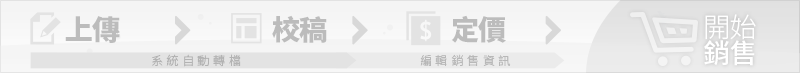
<style>
.page{position:relative;width:800px;height:73px}
.page>*{position:absolute;margin:0}
.t1{font:27.9px "SourceHanSansTC-Heavy";letter-spacing:-0.02em;color:#bcbcbc}
.t2{font:27.1px/25.9px "SourceHanSansTC-Light";letter-spacing:-0.02em;color:#ffffff}
.t3{font:27.1px/25.9px "SourceHanSansTC-Medium";letter-spacing:-0.02em;color:#ffffff}
.t4{font:11.9px "SourceHanSansTC-Light";letter-spacing:0.3em;color:#b3b3b3}
.t5{font:11.9px "SourceHanSansTC-Light";letter-spacing:0.3em;color:#b8b8b8}
</style>
<div class="page">
<p class="t1" style="left:65px;top:16px;width:55px;height:27px">上傳</p>
<p class="t1" style="left:272px;top:15px;width:55px;height:28px">校稿</p>
<p class="t1" style="left:451px;top:15px;width:55px;height:28px">定價</p>
<p class="t2" style="left:704px;top:14px;width:52px;height:52px">開始<br><span class="t3">銷售</span></p>
<p class="t4" style="left:152px;top:54px;width:89px;height:13px">系統自動轉檔</p>
<p class="t5" style="left:420px;top:54px;width:91px;height:13px">編輯銷售資訊</p>
</div>
